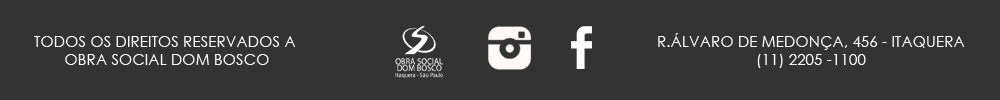
<style>
.page{position:relative;width:1000px;height:100px;background:#333333}
.page>*{position:absolute;margin:0}
.t1{font:15.2px "CenturyGothic";color:#ffffff;text-transform:uppercase}
</style>
<div class="page">
<p class="t1" style="left:34px;top:36px;width:262px;height:29px;text-align:center">Todos os direitos reservados a <br>Obra Social Dom Bosco</p>
<p class="t1" style="left:658px;top:33px;width:307px;height:35px;text-align:center">R.álvaro de medonça, 456 - itaquera<br>(11) 2205 -1100</p>
</div>
